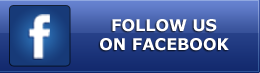
<style>
.page{position:relative;width:260px;height:73px}
.page>*{position:absolute;margin:0}
.t1{font:16px "Verdana-Bold";color:#ffffff;text-transform:uppercase}
</style>
<div class="page">
<p class="t1" style="left:100px;top:19px;width:129px;height:32px;text-align:center">Follow Us<br>on facebook</p>
</div>
